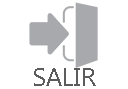
<style>
.page{position:relative;width:128px;height:89px;background:#ffffff}
.page>*{position:absolute;margin:0}
.t1{font:25px "SegoeUI";color:#5c5c5c}
</style>
<div class="page">
<p class="t1" style="left:34px;top:68px;width:62px;height:18px">SALIR</p>
</div>
